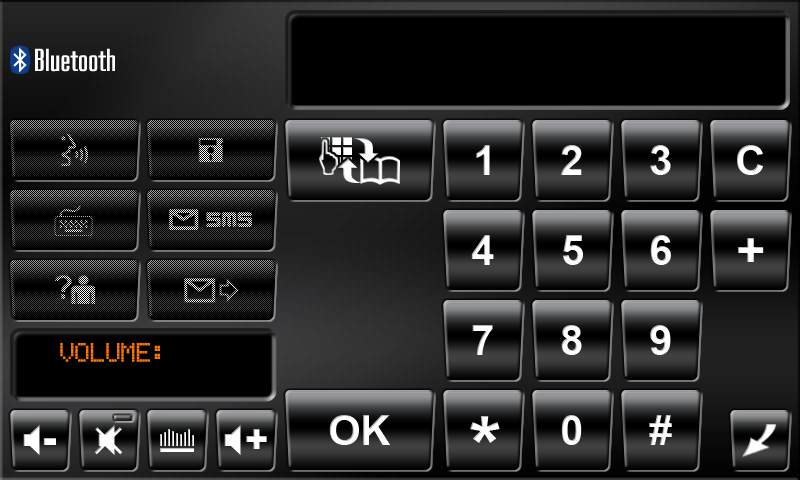
<style>
.page{position:relative;width:800px;height:480px;background:#000000}
.page>*{position:absolute;margin:0}
.t1{font:41.7px "Arial-BoldMT";color:#ffffff}
.t2{font:50px "Arial-BoldMT";color:#ffffff}
.t3{font:25px "EricssonGA628";color:#ff7800}
.t4{font:83.3px "Arial-BoldMT";color:#ffffff}
</style>
<div class="page">
<p class="t1" style="left:476px;top:145px;width:14px;height:30px">1</p>
<p class="t1" style="left:561px;top:145px;width:21px;height:30px">2</p>
<p class="t1" style="left:650px;top:145px;width:21px;height:30px">3</p>
<p class="t1" style="left:737px;top:145px;width:27px;height:30px">C</p>
<p class="t1" style="left:471px;top:235px;width:23px;height:30px">4</p>
<p class="t1" style="left:562px;top:235px;width:21px;height:30px">5</p>
<p class="t1" style="left:650px;top:235px;width:21px;height:30px">6</p>
<p class="t2" style="left:738px;top:238px;width:26px;height:24px">+</p>
<p class="t1" style="left:472px;top:325px;width:21px;height:30px">7</p>
<p class="t1" style="left:561px;top:325px;width:21px;height:30px">8</p>
<p class="t1" style="left:650px;top:325px;width:21px;height:30px">9</p>
<p class="t3" style="left:60px;top:343px;width:100px;height:19px">VOLUME:</p>
<p class="t1" style="left:329px;top:415px;width:61px;height:30px">OK</p>
<p class="t4" style="left:470px;top:416px;width:30px;height:27px">*</p>
<p class="t1" style="left:561px;top:415px;width:21px;height:30px">0</p>
<p class="t1" style="left:649px;top:415px;width:23px;height:30px">#</p>
</div>
